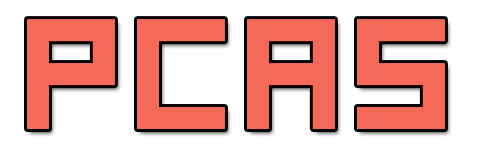
<style>
.page{position:relative;width:487px;height:144px;background:#ffffff}
.page>*{position:absolute;margin:0}
.t1{font:150.5px "Symtext";color:#f56958}
</style>
<div class="page">
<p class="t1" style="left:27px;top:19px;width:418px;height:110px">PCAS</p>
</div>
